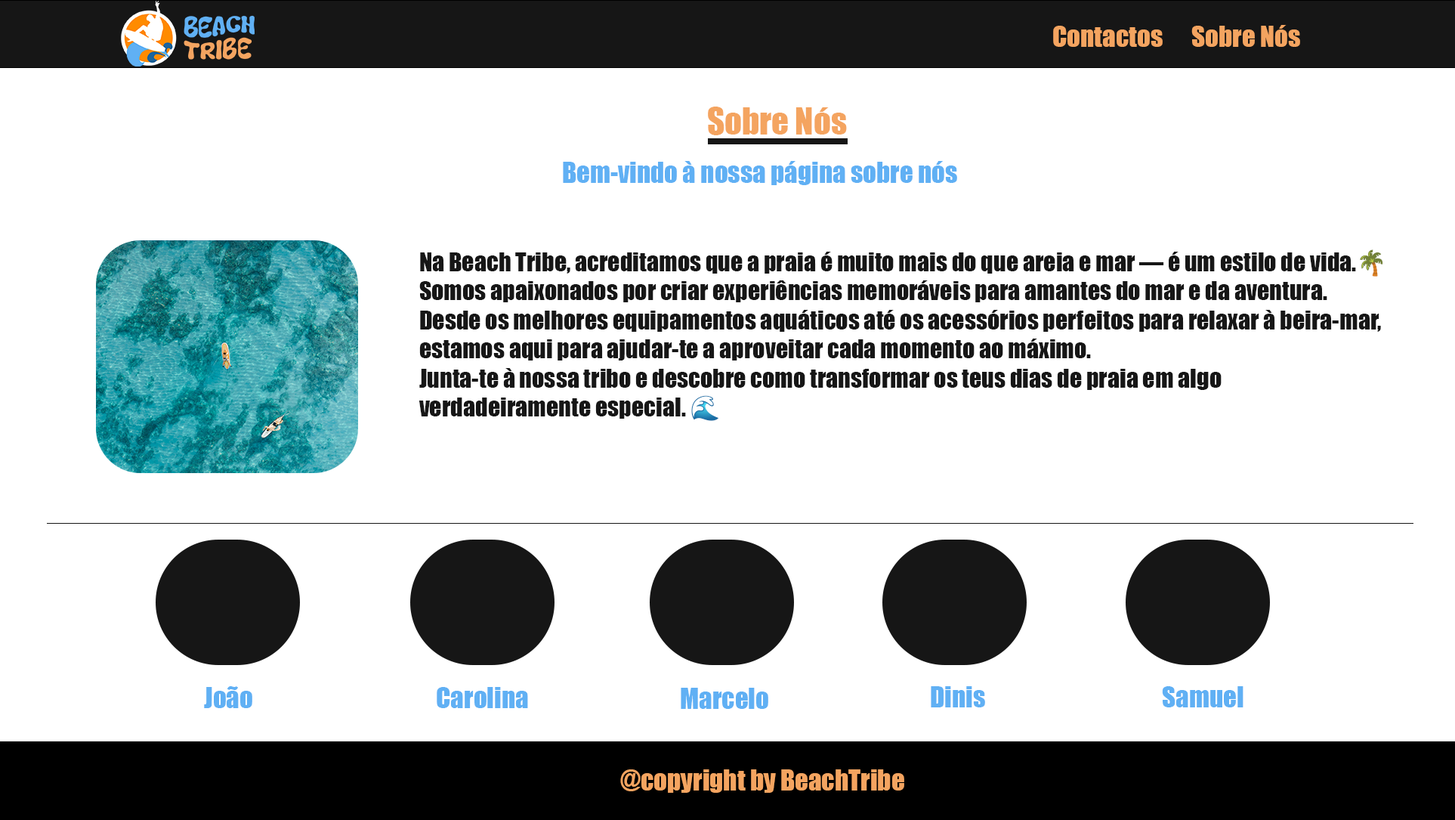
<style>
.page{position:relative;width:1455px;height:820px;background:#ffffff}
.page>*{position:absolute;margin:0}
.t1{font:26.4px "Impact";color:#f4a460}
.t2{font:34px "Impact";color:#f4a460}
.t3{font:26.4px "Impact";color:#60b0f4}
.t4{font:24.2px "Impact";color:#161616}
.t5{font:24.2px "NotoColorEmoji-SVG";color:#60b0f4}
</style>
<div class="page">
<p class="t1" style="left:1053px;top:26px;width:110px;height:21px">Contactos</p>
<p class="t1" style="left:1191px;top:25px;width:109px;height:22px">Sobre Nós</p>
<p class="t2" style="left:708px;top:107px;width:139px;height:28px">Sobre Nós</p>
<p class="t3" style="left:563px;top:161px;width:394px;height:24px">Bem-vindo à nossa página sobre nós</p>
<p class="t4" style="left:418px;top:249px;width:965px;height:172px">Na Beach Tribe, acreditamos que a praia é muito mais do que areia e mar — é um estilo de vida.<span class="t5">🌴<br></span>Somos apaixonados por criar experiências memoráveis para amantes do mar e da aventura. <br>Desde os melhores equipamentos aquáticos até os acessórios perfeitos para relaxar à beira-mar, <br>estamos aqui para ajudar-te a aproveitar cada momento ao máximo.<br>Junta-te à nossa tribo e descobre como transformar os teus dias de praia em algo <br>verdadeiramente especial. <span class="t5">🌊</span></p>
<p class="t3" style="left:204px;top:686px;width:48px;height:22px">João</p>
<p class="t3" style="left:437px;top:687px;width:91px;height:21px">Carolina</p>
<p class="t3" style="left:681px;top:687px;width:87px;height:22px">Marcelo</p>
<p class="t3" style="left:931px;top:686px;width:54px;height:21px">Dinis</p>
<p class="t3" style="left:1162px;top:686px;width:81px;height:21px">Samuel</p>
<p class="t1" style="left:620px;top:769px;width:284px;height:23px">@copyright by BeachTribe</p>
</div>
